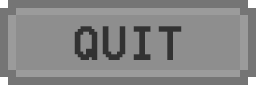
<style>
.page{position:relative;width:256px;height:85px;background:#8e8e8e}
.page>*{position:absolute;margin:0}
.t1{font:60px "8514oem";color:#323232}
</style>
<div class="page">
<p class="t1" style="left:74px;top:26px;width:108px;height:34px">QUIT</p>
</div>
